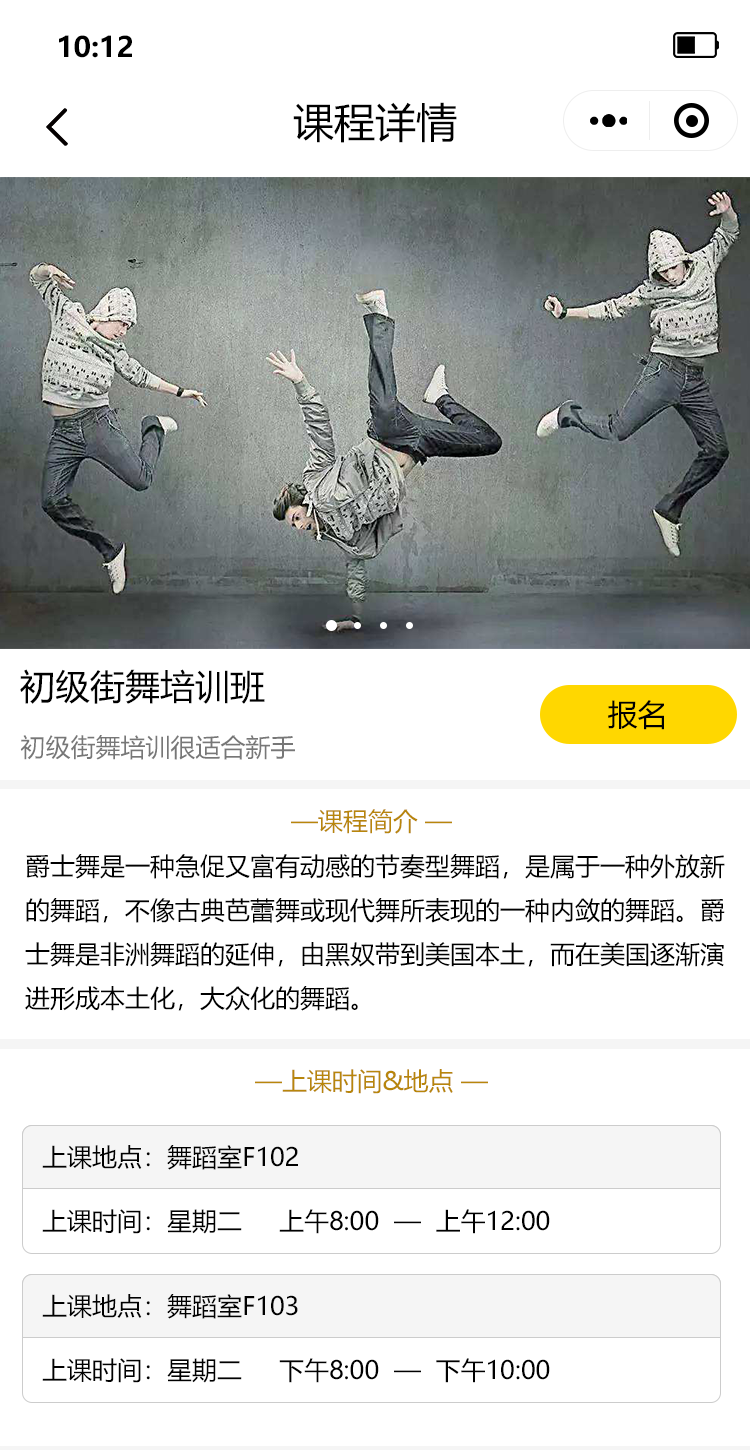
<style>
.page{position:relative;width:750px;height:1450px;background:#ffffff}
.page>*{position:absolute;margin:0}
.t1{font:28.1px "MicrosoftYaHei-Bold";color:#000000}
.t2{font:41px "MicrosoftYaHei";color:#000000}
.t3{font:35px "MicrosoftYaHei";color:#000000}
.t4{font:30px "MicrosoftYaHei";color:#000000}
.t5{font:25px "MicrosoftYaHei";color:#777777}
.t6{font:25px "MicrosoftYaHei";color:#b8860b}
.t7{font:25px "MicrosoftYaHei";color:#000000}
</style>
<div class="page">
<p class="t1" style="left:59px;top:35px;width:73px;height:23px">10:12</p>
<p class="t2" style="left:293px;top:102px;width:164px;height:41px">课程详情</p>
<p class="t3" style="left:20px;top:669px;width:245px;height:35px">初级街舞培训班</p>
<p class="t4" style="left:608px;top:700px;width:56px;height:30px">报名</p>
<p class="t5" style="left:20px;top:735px;width:275px;height:25px">初级街舞培训很适合新手</p>
<p class="t6" style="left:291px;top:809px;width:161px;height:25px">—课程简介 —</p>
<p class="t7" style="left:25px;top:854px;width:700px;height:157px">爵士舞是一种急促又富有动感的节奏型舞蹈，是属于一种外放新<br>的舞蹈，不像古典芭蕾舞或现代舞所表现的一种内敛的舞蹈。爵<br>士舞是非洲舞蹈的延伸，由黑奴带到美国本土，而在美国逐渐演<br>进形成本土化，大众化的舞蹈。</p>
<p class="t6" style="left:255px;top:1069px;width:233px;height:25px">—上课时间&amp;地点 —</p>
<p class="t7" style="left:42px;top:1145px;width:256px;height:25px">上课地点：舞蹈室F102</p>
<p class="t7" style="left:42px;top:1209px;width:508px;height:25px">上课时间：星期二     上午8:00  —  上午12:00</p>
<p class="t7" style="left:42px;top:1294px;width:256px;height:25px">上课地点：舞蹈室F103</p>
<p class="t7" style="left:42px;top:1358px;width:508px;height:25px">上课时间：星期二     下午8:00  —  下午10:00</p>
</div>
